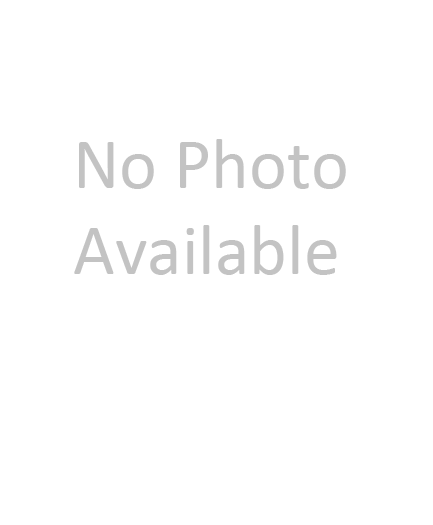
<style>
.page{position:relative;width:433px;height:525px;background:#ffffff}
.page>*{position:absolute;margin:0}
.t1{font:72px "Calibri";color:#c3c3c3}
</style>
<div class="page">
<p class="t1" style="left:74px;top:139px;width:272px;height:136px">No Photo<br>Available</p>
</div>
